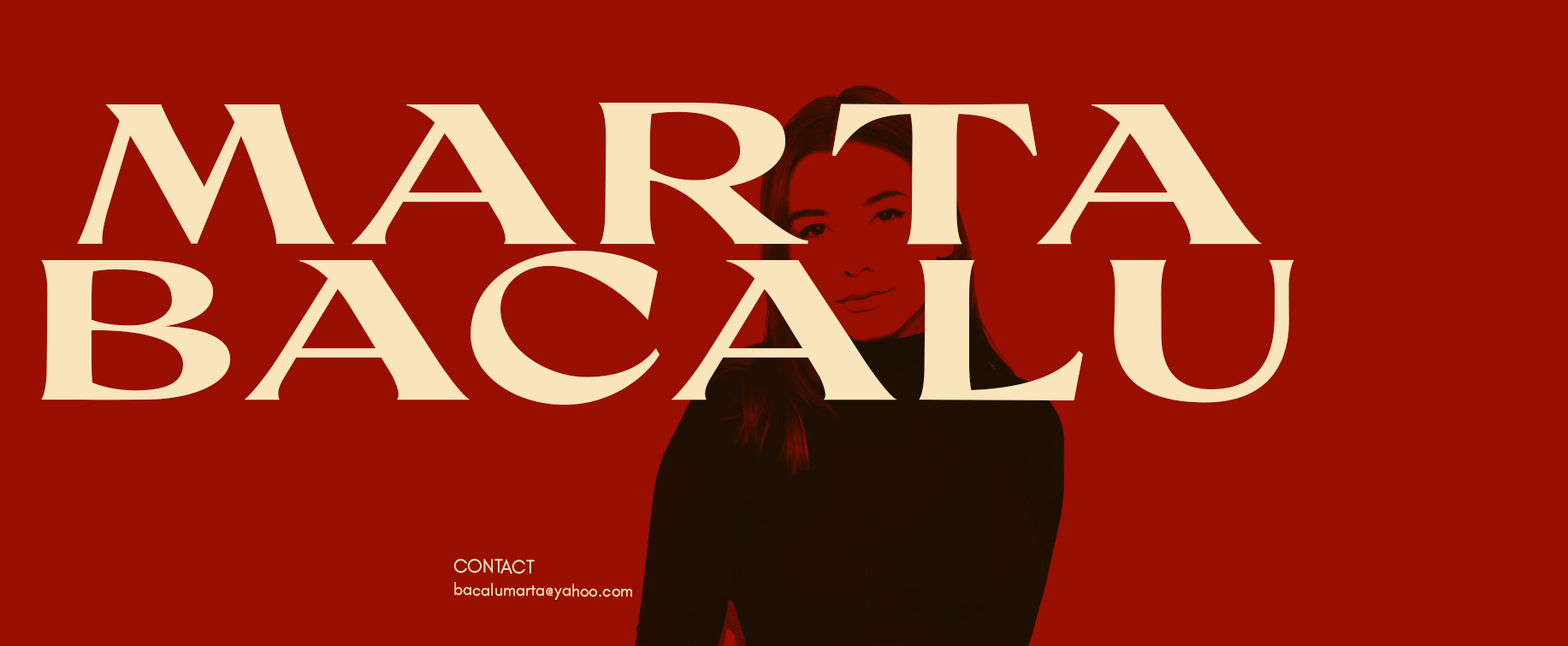
<style>
.page{position:relative;width:1568px;height:646px;background:#990f02}
.page>*{position:absolute;margin:0}
.t1{font:199px "Coconat-BoldExt";color:#fae4bb}
.t2{font:199.1px "Coconat-BoldExt";color:#fae4bb}
.t3{font:19.5px "GlacialIndifference-Regular";color:#fae4bb}
.t4{font:16.6px "GlacialIndifference-Regular";color:#fae4bb}
</style>
<div class="page">
<p class="t1" style="left:77px;top:103px;width:1185px;height:142px">MARTA</p>
<p class="t2" style="left:41px;top:251px;width:1253px;height:154px">BACALU</p>
<p class="t3" style="left:453px;top:558px;width:82px;height:16px;rotate:1deg">CONTACT</p>
<p class="t4" style="left:454px;top:582px;width:178px;height:18px">bacalumarta@yahoo.com</p>
</div>
